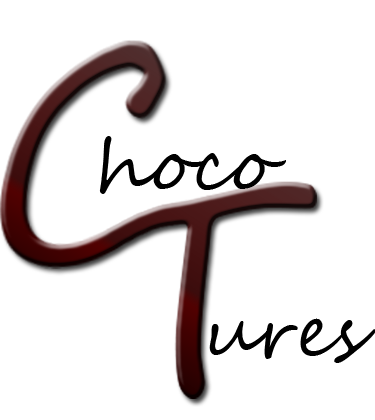
<style>
.page{position:relative;width:375px;height:420px;background:#ffffff}
.page>*{position:absolute;margin:0}
.t1{font:72px "SegoeScript";color:#000000}
</style>
<div class="page">
<p class="t1" style="left:99px;top:136px;width:187px;height:58px">hoco</p>
<p class="t1" style="left:209px;top:318px;width:167px;height:45px">ures</p>
</div>
